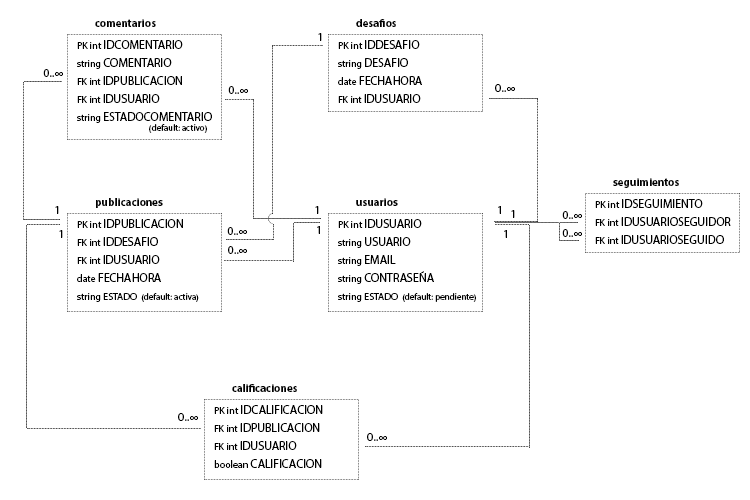
<style>
.page{position:relative;width:750px;height:500px;background:#ffffff}
.page>*{position:absolute;margin:0}
.t1{font:11px "MyriadPro-Bold";color:#000000}
.t2{font:12px/18px "MyriadPro-Regular";color:#000000}
.t3{font:10px/18px "MyriadPro-Regular";color:#000000}
.t4{font:12px/6px "MyriadPro-Regular";color:#000000}
.t5{font:9px/6px "MyriadPro-Regular";color:#000000}
.t6{font:9px/10px "MyriadPro-Regular";color:#000000}
.t7{font:12px "MyriadPro-Regular";color:#000000}
.t8{font:9px/18px "MyriadPro-Regular";color:#000000}
</style>
<div class="page">
<p class="t1" style="left:95px;top:19px;width:61px;height:8px">comentarios</p>
<p class="t1" style="left:356px;top:19px;width:40px;height:8px">desafios</p>
<p class="t2" style="left:77px;top:40px;width:135px;height:93px"><span class="t3">PK int</span> IDCOMENTARIO<br><span class="t3">string </span>COMENTARIO<br><span class="t3">FK int </span>IDPUBLICACION<br><span class="t3">FK int </span>IDUSUARIO<br><span class="t3">string </span>ESTADOCOMEN<span class="t4">TARIO<br></span><span class="t5">  (default: </span><span class="t6">activo)</span></p>
<p class="t7" style="left:318px;top:33px;width:4px;height:8px">1</p>
<p class="t2" style="left:338px;top:40px;width:84px;height:63px"><span class="t3">PK int</span> IDDESAFIO<br><span class="t3">string </span>DESAFIO<br><span class="t3">date </span>FECHAHORA<br><span class="t3">FK int </span>IDUSUARIO</p>
<p class="t7" style="left:43px;top:69px;width:20px;height:8px">0..∞</p>
<p class="t7" style="left:228px;top:86px;width:20px;height:8px">0..∞</p>
<p class="t7" style="left:495px;top:84px;width:20px;height:8px">0..∞</p>
<p class="t1" style="left:613px;top:178px;width:66px;height:10px">seguimientos</p>
<p class="t1" style="left:96px;top:198px;width:67px;height:10px">publicaciones</p>
<p class="t1" style="left:356px;top:198px;width:42px;height:8px">usuarios</p>
<p class="t7" style="left:55px;top:206px;width:4px;height:8px">1</p>
<p class="t7" style="left:315px;top:206px;width:4px;height:8px">1</p>
<p class="t7" style="left:498px;top:206px;width:3px;height:8px">1</p>
<p class="t2" style="left:595px;top:199px;width:136px;height:45px"><span class="t3">PK int</span> IDSEGUIMIENTO<br><span class="t3">FK int</span> IDUSUARIOSEGUIDOR<br><span class="t3">FK int </span>IDUSUARIOSEGUIDO</p>
<p class="t8" style="left:77px;top:219px;width:122px;height:83px"><span class="t3">PK int</span><span class="t2"> IDPUBLICACION<br></span><span class="t3">FK int</span><span class="t2"> IDDESAFIO<br></span><span class="t3">FK int </span><span class="t2">IDUSUARIO<br></span><span class="t3">date </span><span class="t2">FECHAHORA<br></span><span class="t3">string ESTADO  </span>(default: activa)</p>
<p class="t8" style="left:338px;top:219px;width:138px;height:83px"><span class="t3">PK int</span><span class="t2"> IDUSUARIO<br></span><span class="t3">string</span><span class="t2"> USUARIO<br></span><span class="t3">string </span><span class="t2">EMAIL<br></span><span class="t3">string </span><span class="t2">CONTRASEÑA<br></span><span class="t3">string ESTADO  </span>(default: pendiente)</p>
<p class="t7" style="left:511px;top:210px;width:4px;height:8px">1</p>
<p class="t2" style="left:562px;top:211px;width:20px;height:26px">0..∞<br>0..∞</p>
<p class="t7" style="left:59px;top:230px;width:4px;height:8px">1</p>
<p class="t7" style="left:227px;top:227px;width:20px;height:8px">0..∞</p>
<p class="t7" style="left:317px;top:226px;width:3px;height:8px">1</p>
<p class="t7" style="left:504px;top:230px;width:3px;height:8px">1</p>
<p class="t7" style="left:228px;top:246px;width:19px;height:8px">0..∞</p>
<p class="t1" style="left:232px;top:384px;width:65px;height:8px">calificaciones</p>
<p class="t7" style="left:178px;top:413px;width:20px;height:8px">0..∞</p>
<p class="t2" style="left:214px;top:405px;width:109px;height:63px"><span class="t3">PK int</span> IDCALIFICACION<br><span class="t3">FK int</span> IDPUBLICACION<br><span class="t3">FK int </span>IDUSUARIO<br><span class="t3">boolean </span>CALIFICACION</p>
<p class="t7" style="left:367px;top:433px;width:20px;height:8px">0..∞</p>
</div>
